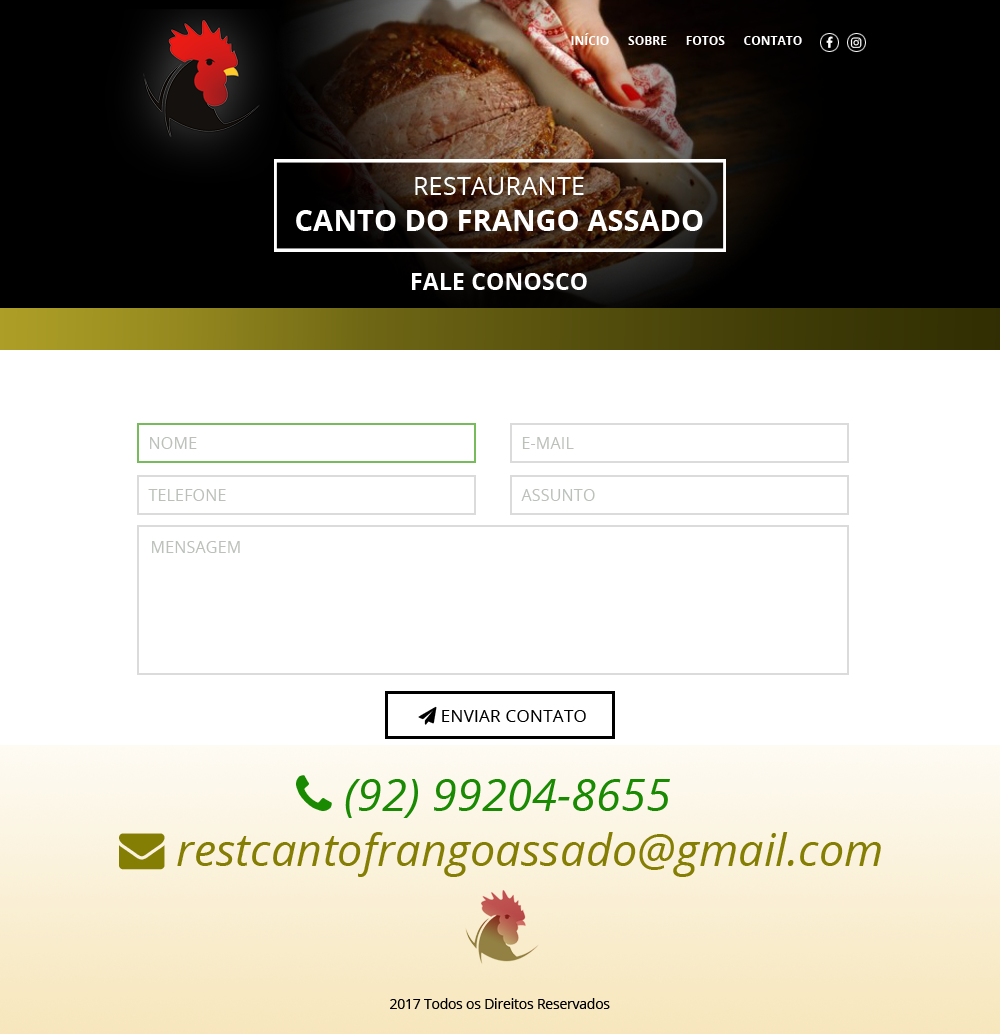
<style>
.page{position:relative;width:1000px;height:1034px;background:#ffffff}
.page>*{position:absolute;margin:0}
.t1{font:12px "OpenSans-Bold";color:#ffffff}
.t2{font:25.5px "OpenSans";color:#ffffff}
.t3{font:29.1px "OpenSans-Bold";color:#ffffff}
.t4{font:23.3px "OpenSans-Bold";color:#ffffff}
.t5{font:16.3px "OpenSans";color:#bbc0b9}
.t6{font:13.5px "OpenSans";color:#000000}
</style>
<div class="page">
<p class="t1" style="left:571px;top:33px;width:231px;height:12px">INÍCIO      SOBRE      FOTOS      CONTATO</p>
<p class="t2" style="left:415px;top:177px;width:169px;height:18px">RESTAURANTE</p>
<p class="t3" style="left:296px;top:210px;width:407px;height:21px">CANTO DO FRANGO ASSADO</p>
<p class="t4" style="left:412px;top:273px;width:175px;height:17px">FALE CONOSCO</p>
<p class="t5" style="left:150px;top:437px;width:47px;height:12px">NOME</p>
<p class="t5" style="left:522px;top:437px;width:52px;height:12px">E-MAIL</p>
<p class="t5" style="left:148px;top:489px;width:78px;height:12px">TELEFONE</p>
<p class="t5" style="left:521px;top:489px;width:74px;height:12px">ASSUNTO</p>
<p class="t5" style="left:152px;top:541px;width:88px;height:12px">MENSAGEM</p>
<p class="t6" style="left:390px;top:998px;width:220px;height:11px">2017 Todos os Direitos Reservados</p>
</div>
